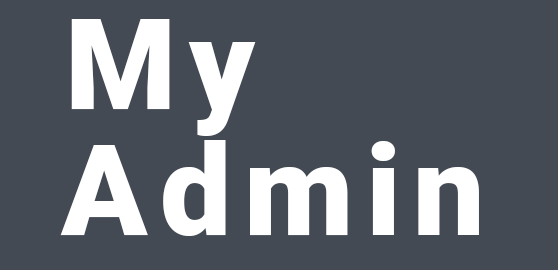
<style>
.page{position:relative;width:558px;height:270px;background:#434a54}
.page>*{position:absolute;margin:0}
.t1{font:126.6px/126.6px "Roboto-Black";letter-spacing:0.1em;color:#ffffff}
</style>
<div class="page">
<p class="t1" style="left:60px;top:19px;width:419px;height:217px">My<br>Admin</p>
</div>
